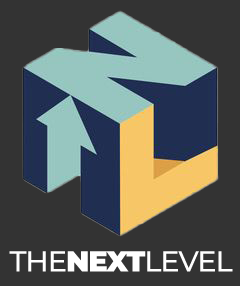
<style>
.page{position:relative;width:240px;height:286px;background:#333333}
.page>*{position:absolute;margin:0}
.t1{font:29px "MontserratThin-Medium";letter-spacing:-0.04em;color:#ffffff}
.t2{font:29px "MontserratThin-Black";letter-spacing:-0.04em;color:#ffffff}
</style>
<div class="page">
<p class="t1" style="left:9px;top:251px;width:224px;height:21px">THE<span class="t2">NEXT</span>LEVEL</p>
</div>
